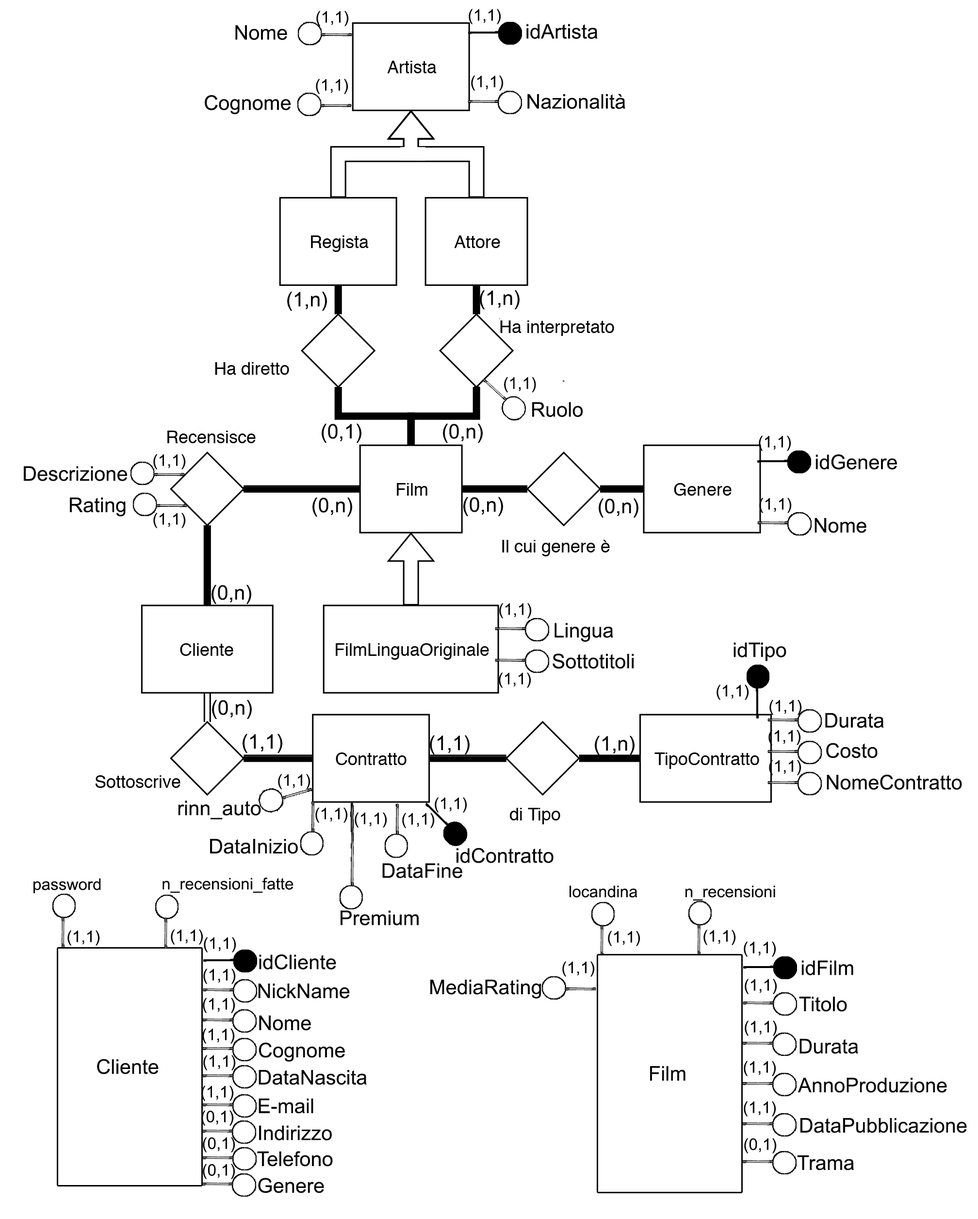
<style>
.page{position:relative;width:978px;height:1219px;background:#ffffff}
.page>*{position:absolute;margin:0}
.t1{font:16px "ArialMT";color:#050505}
.t2{font:20.2px "ArialMT";color:#050505}
.t3{font:16.2px "ArialMT";color:#050505}
</style>
<div class="page">
<p class="t1" style="left:316px;top:11px;width:33px;height:15px">(1,1)</p>
<p class="t1" style="left:469px;top:9px;width:32px;height:15px">(1,1)</p>
<p class="t2" style="left:235px;top:25px;width:52px;height:15px">Nome</p>
<p class="t2" style="left:527px;top:24px;width:71px;height:15px">idArtista</p>
<p class="t1" style="left:471px;top:75px;width:33px;height:16px">(1,1)</p>
<p class="t1" style="left:316px;top:79px;width:32px;height:15px">(1,1)</p>
<p class="t2" style="left:205px;top:95px;width:86px;height:20px">Cognome</p>
<p class="t2" style="left:528px;top:94px;width:98px;height:15px">Nazionalità</p>
<p class="t2" style="left:287px;top:291px;width:40px;height:20px">(1,n)</p>
<p class="t2" style="left:480px;top:290px;width:40px;height:20px">(1,n)</p>
<p class="t3" style="left:504px;top:377px;width:32px;height:16px">(1,1)</p>
<p class="t2" style="left:532px;top:402px;width:51px;height:15px">Ruolo</p>
<p class="t2" style="left:322px;top:423px;width:40px;height:20px">(0,1)</p>
<p class="t2" style="left:443px;top:423px;width:40px;height:20px">(0,n)</p>
<p class="t1" style="left:759px;top:435px;width:33px;height:16px">(1,1)</p>
<p class="t1" style="left:153px;top:454px;width:33px;height:15px">(1,1)</p>
<p class="t2" style="left:816px;top:454px;width:81px;height:15px">idGenere</p>
<p class="t2" style="left:24px;top:466px;width:103px;height:15px">Descrizione</p>
<p class="t2" style="left:70px;top:497px;width:56px;height:19px">Rating</p>
<p class="t2" style="left:313px;top:497px;width:39px;height:20px">(0,n)</p>
<p class="t2" style="left:464px;top:497px;width:39px;height:19px">(0,n)</p>
<p class="t2" style="left:599px;top:498px;width:40px;height:20px">(0,n)</p>
<p class="t1" style="left:760px;top:497px;width:32px;height:16px">(1,1)</p>
<p class="t1" style="left:153px;top:513px;width:33px;height:15px">(1,1)</p>
<p class="t2" style="left:815px;top:518px;width:52px;height:15px">Nome</p>
<p class="t2" style="left:212px;top:584px;width:39px;height:20px">(0,n)</p>
<p class="t1" style="left:499px;top:603px;width:33px;height:15px">(1,1)</p>
<p class="t2" style="left:555px;top:623px;width:58px;height:19px">Lingua</p>
<p class="t2" style="left:553px;top:653px;width:81px;height:16px">Sottotitoli</p>
<p class="t2" style="left:734px;top:642px;width:53px;height:19px">idTipo</p>
<p class="t1" style="left:499px;top:672px;width:32px;height:16px">(1,1)</p>
<p class="t1" style="left:717px;top:684px;width:32px;height:16px">(1,1)</p>
<p class="t2" style="left:212px;top:699px;width:40px;height:20px">(0,n)</p>
<p class="t1" style="left:770px;top:699px;width:32px;height:16px">(1,1)</p>
<p class="t2" style="left:826px;top:712px;width:58px;height:16px">Durata</p>
<p class="t2" style="left:243px;top:733px;width:39px;height:20px">(1,1)</p>
<p class="t2" style="left:430px;top:735px;width:40px;height:19px">(1,1)</p>
<p class="t2" style="left:595px;top:735px;width:40px;height:20px">(1,n)</p>
<p class="t1" style="left:769px;top:729px;width:32px;height:16px">(1,1)</p>
<p class="t2" style="left:827px;top:743px;width:51px;height:15px">Costo</p>
<p class="t1" style="left:769px;top:760px;width:33px;height:15px">(1,1)</p>
<p class="t1" style="left:278px;top:774px;width:33px;height:15px">(1,1)</p>
<p class="t2" style="left:827px;top:774px;width:135px;height:16px">NomeContratto</p>
<p class="t1" style="left:435px;top:797px;width:32px;height:15px">(1,1)</p>
<p class="t2" style="left:178px;top:800px;width:83px;height:19px">rinn_auto</p>
<p class="t1" style="left:315px;top:807px;width:33px;height:16px">(1,1)</p>
<p class="t1" style="left:355px;top:812px;width:32px;height:16px">(1,1)</p>
<p class="t1" style="left:402px;top:812px;width:33px;height:16px">(1,1)</p>
<p class="t2" style="left:210px;top:839px;width:88px;height:15px">DataInizio</p>
<p class="t2" style="left:457px;top:847px;width:97px;height:16px">idContratto</p>
<p class="t2" style="left:382px;top:863px;width:81px;height:15px">DataFine</p>
<p class="t3" style="left:33px;top:878px;width:68px;height:15px">password</p>
<p class="t3" style="left:163px;top:877px;width:131px;height:16px">n_recensioni_fatte</p>
<p class="t3" style="left:570px;top:885px;width:68px;height:12px">locandina</p>
<p class="t3" style="left:686px;top:885px;width:90px;height:15px">n_recensioni</p>
<p class="t2" style="left:341px;top:910px;width:78px;height:16px">Premium</p>
<p class="t1" style="left:67px;top:930px;width:33px;height:15px">(1,1)</p>
<p class="t1" style="left:171px;top:929px;width:32px;height:15px">(1,1)</p>
<p class="t1" style="left:704px;top:929px;width:32px;height:16px">(1,1)</p>
<p class="t1" style="left:204px;top:937px;width:32px;height:15px">(1,1)</p>
<p class="t1" style="left:608px;top:930px;width:33px;height:16px">(1,1)</p>
<p class="t1" style="left:744px;top:941px;width:33px;height:16px">(1,1)</p>
<p class="t2" style="left:259px;top:954px;width:77px;height:15px">idCliente</p>
<p class="t1" style="left:563px;top:961px;width:32px;height:16px">(1,1)</p>
<p class="t2" style="left:802px;top:960px;width:52px;height:15px">idFilm</p>
<p class="t1" style="left:203px;top:968px;width:33px;height:16px">(1,1)</p>
<p class="t2" style="left:258px;top:983px;width:92px;height:15px">NickName</p>
<p class="t2" style="left:430px;top:979px;width:112px;height:19px">MediaRating</p>
<p class="t1" style="left:745px;top:978px;width:33px;height:16px">(1,1)</p>
<p class="t1" style="left:203px;top:997px;width:32px;height:16px">(1,1)</p>
<p class="t2" style="left:799px;top:996px;width:48px;height:15px">Titolo</p>
<p class="t2" style="left:259px;top:1015px;width:52px;height:15px">Nome</p>
<p class="t1" style="left:745px;top:1020px;width:33px;height:16px">(1,1)</p>
<p class="t1" style="left:202px;top:1028px;width:33px;height:15px">(1,1)</p>
<p class="t2" style="left:259px;top:1042px;width:86px;height:19px">Cognome</p>
<p class="t2" style="left:800px;top:1038px;width:59px;height:16px">Durata</p>
<p class="t2" style="left:97px;top:1059px;width:62px;height:15px">Cliente</p>
<p class="t1" style="left:203px;top:1055px;width:33px;height:15px">(1,1)</p>
<p class="t1" style="left:744px;top:1060px;width:33px;height:16px">(1,1)</p>
<p class="t2" style="left:259px;top:1070px;width:108px;height:15px">DataNascita</p>
<p class="t2" style="left:650px;top:1066px;width:36px;height:14px">Film</p>
<p class="t1" style="left:201px;top:1085px;width:33px;height:16px">(1,1)</p>
<p class="t2" style="left:798px;top:1077px;width:149px;height:16px">AnnoProduzione</p>
<p class="t2" style="left:259px;top:1098px;width:55px;height:15px">E-mail</p>
<p class="t1" style="left:201px;top:1110px;width:33px;height:16px">(0,1)</p>
<p class="t1" style="left:744px;top:1101px;width:33px;height:15px">(1,1)</p>
<p class="t2" style="left:800px;top:1118px;width:167px;height:15px">DataPubblicazione</p>
<p class="t2" style="left:259px;top:1125px;width:73px;height:15px">Indirizzo</p>
<p class="t1" style="left:203px;top:1137px;width:32px;height:15px">(0,1)</p>
<p class="t1" style="left:745px;top:1138px;width:32px;height:15px">(0,1)</p>
<p class="t2" style="left:257px;top:1151px;width:76px;height:15px">Telefono</p>
<p class="t2" style="left:797px;top:1155px;width:57px;height:15px">Trama</p>
<p class="t1" style="left:203px;top:1163px;width:32px;height:16px">(0,1)</p>
<p class="t2" style="left:258px;top:1177px;width:66px;height:16px">Genere</p>
</div>
